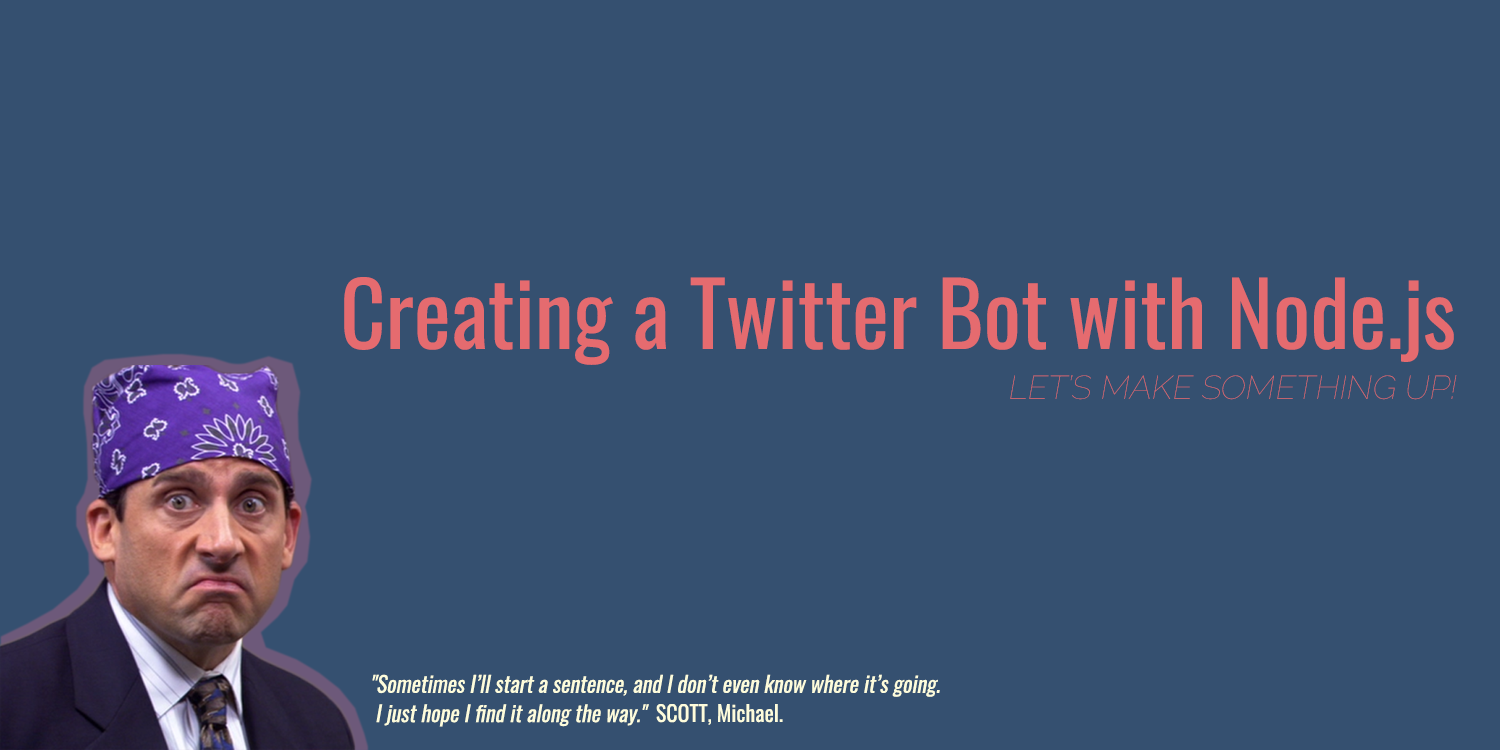
<style>
.page{position:relative;width:1500px;height:750px;background:#355070}
.page>*{position:absolute;margin:0}
.t1{font:88px "Oswald-Regular";color:#e56b6f}
.t2{font:33px "Raleway-Thin";font-style:italic}
.t3{font:22px/29.3px "Oswald-Regular";color:#fdfcdc;font-style:italic}
.t4{font:12px/29.3px "Oswald-Regular";color:#fdfcdc}
</style>
<div class="page">
<p class="t1" style="left:344px;top:277px;width:1110px;height:88px">Creating a Twitter Bot with Node.js</p>
<p class="t2" style="left:1010px;top:375px;width:447px;height:25px">LET’S MAKE SOMETHING UP!</p>
<p class="t3" style="left:372px;top:674px;width:568px;height:53px">"Sometimes I’ll start a sentence, and I don’t even know where it’s going.<br> I just hope I find it along the way."</p>
<p class="t4" style="left:656px;top:704px;width:127px;height:21px;text-align:right">SCOTT, Michael.</p>
</div>
